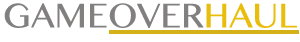
<style>
.page{position:relative;width:300px;height:42px;background:#ffffff}
.page>*{position:absolute;margin:0}
.t1{font:36px "MalayalamMN";color:#827f7f}
.t2{font:36px "MalayalamMN";color:#e9bd0c}
</style>
<div class="page">
<p class="t1" style="left:4px;top:3px;width:293px;height:25px">GAMEOVER<span class="t2">HAUL</span></p>
</div>
